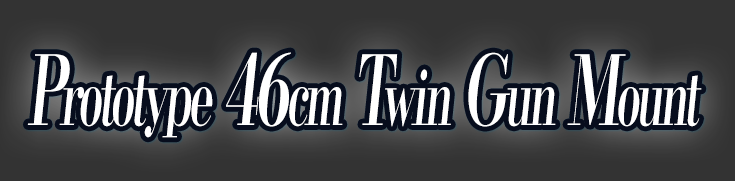
<style>
.page{position:relative;width:735px;height:181px;background:#333333}
.page>*{position:absolute;margin:0}
.t1{font:76.8px "KochoStd-Heavy";letter-spacing:-0.08em;color:#ffffff;font-style:italic;scale:0.58 1}
.t2{font:96px "KochoStd-Heavy";letter-spacing:-0.08em;color:#ffffff;font-style:italic;scale:0.58 1}
</style>
<div class="page">
<p class="t1" style="left:27px;top:52px;width:675px;height:86px"><span class="t2">P</span>rototype<span class="t2"> 46</span>cm<span class="t2"> T</span>win<span class="t2"> G</span>un<span class="t2"> M</span>ount</p>
</div>
